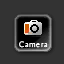
<style>
.page{position:relative;width:64px;height:64px;background:#333333}
.page>*{position:absolute;margin:0}
.t1{font:8px "Amira-Light";letter-spacing:0.075em;color:#ffffff}
</style>
<div class="page">
<p class="t1" style="left:19px;top:41px;width:29px;height:7px">Camera</p>
</div>
